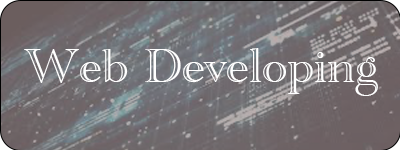
<style>
.page{position:relative;width:400px;height:150px}
.page>*{position:absolute;margin:0}
.t1{font:50px "AcademyEngravedLetPlain";color:#ffffff}
</style>
<div class="page">
<p class="t1" style="left:24px;top:48px;width:354px;height:48px">Web Developing</p>
</div>
